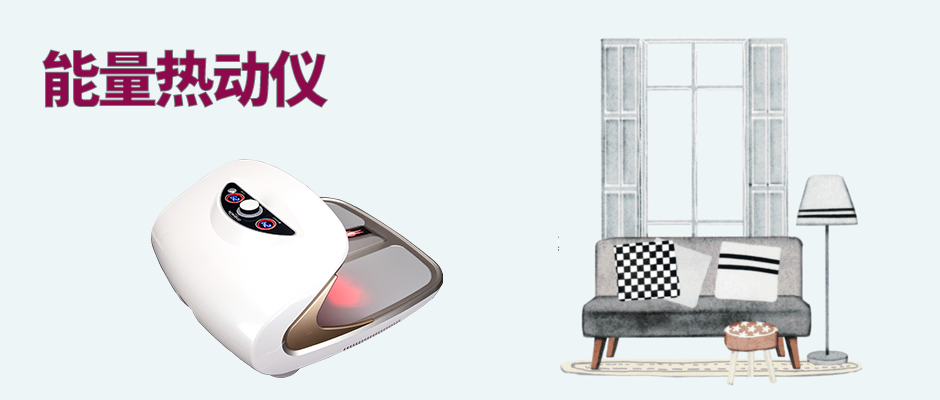
<style>
.page{position:relative;width:940px;height:400px;background:#edf5f7}
.page>*{position:absolute;margin:0}
.t1{font:60.7px "SourceHanSansCN-Heavy";letter-spacing:-0.06em;color:#8e094b;text-transform:uppercase}
</style>
<div class="page">
<p class="t1" style="left:42px;top:49px;width:287px;height:59px">能量热动仪</p>
</div>
